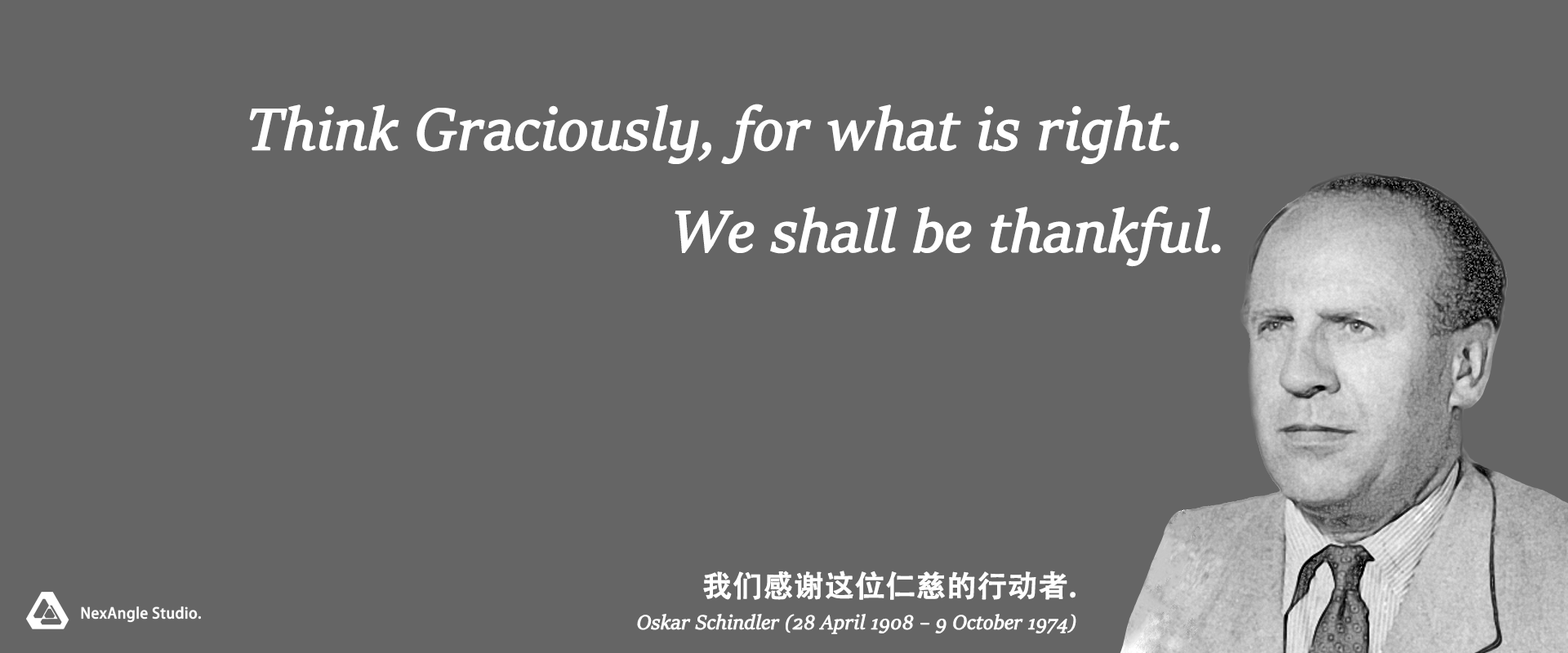
<style>
.page{position:relative;width:1568px;height:653px;background:#656565}
.page>*{position:absolute;margin:0}
.t1{font:65.3px "SitkaBanner-Italic";color:#ffffff;font-weight:bold}
.t2{font:29.7px "AdobeHeitiStd-Regular";color:#ffffff;font-weight:bold}
.t3{font:22.1px "SitkaBanner-Italic";color:#ffffff;font-weight:bold}
</style>
<div class="page">
<p class="t1" style="left:249px;top:104px;width:930px;height:60px">Think Graciously, for what is right.</p>
<p class="t1" style="left:675px;top:206px;width:546px;height:61px">We shall be thankful.</p>
<p class="t2" style="left:703px;top:571px;width:373px;height:29px">我们感谢这位仁慈的行动者.</p>
<p class="t3" style="left:637px;top:614px;width:439px;height:21px">Oskar Schindler (28 April 1908 – 9 October 1974)</p>
</div>
